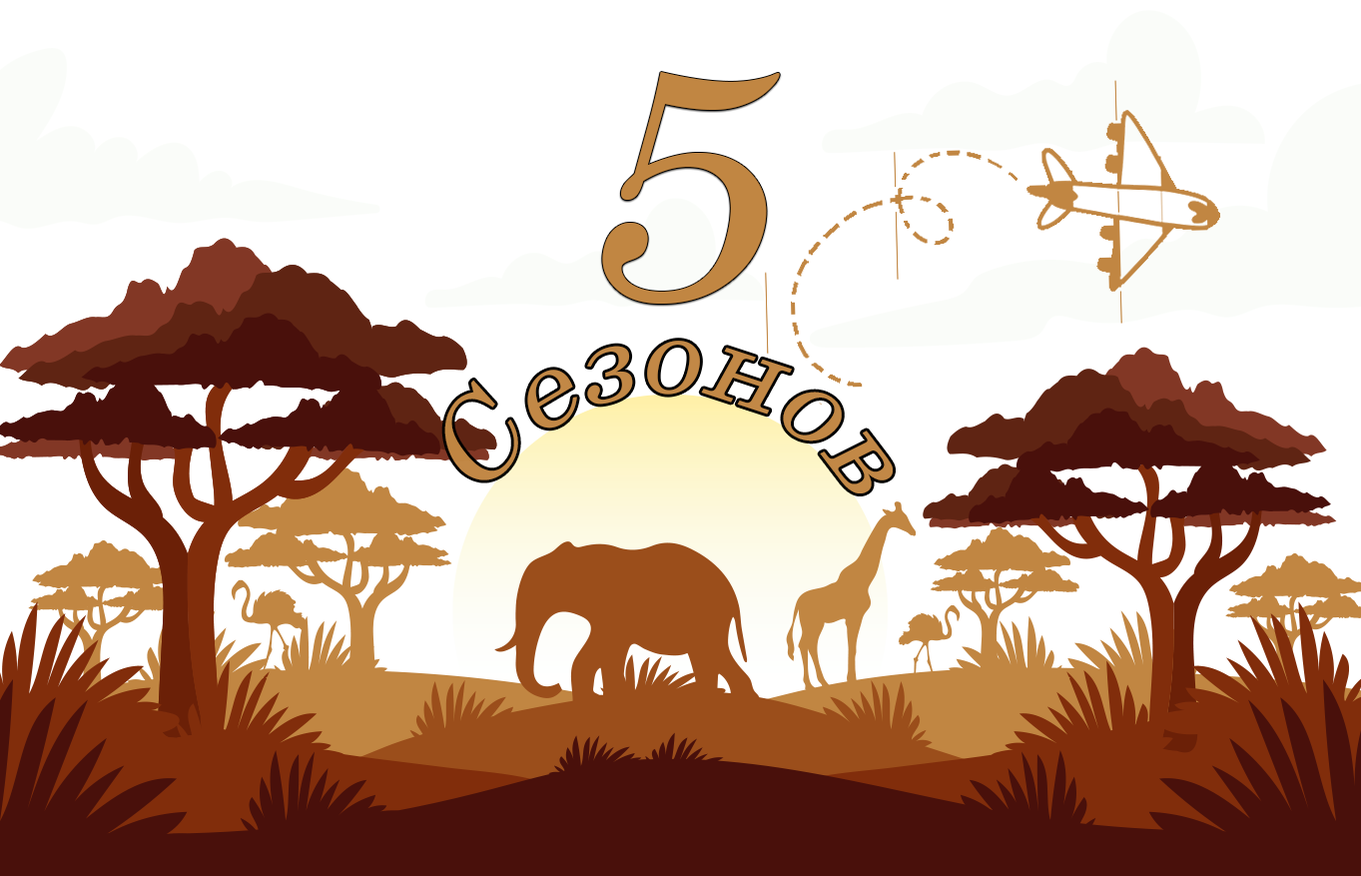
<style>
.page{position:relative;width:1361px;height:876px;background:#ffffff}
.page>*{position:absolute;margin:0}
.t1{font:330.6px "Century";color:#c18642;font-style:italic;scale:1.08 1}
.t2{font:109.9px "Century";color:#c28846;font-style:italic;scale:1.08 1}
</style>
<div class="page">
<p class="t1" style="left:602px;top:72px;width:178px;height:232px">5</p>
<p class="t2" style="left:444px;top:341px;width:449px;height:152px;rotate:-18deg">Сезонов</p>
</div>
